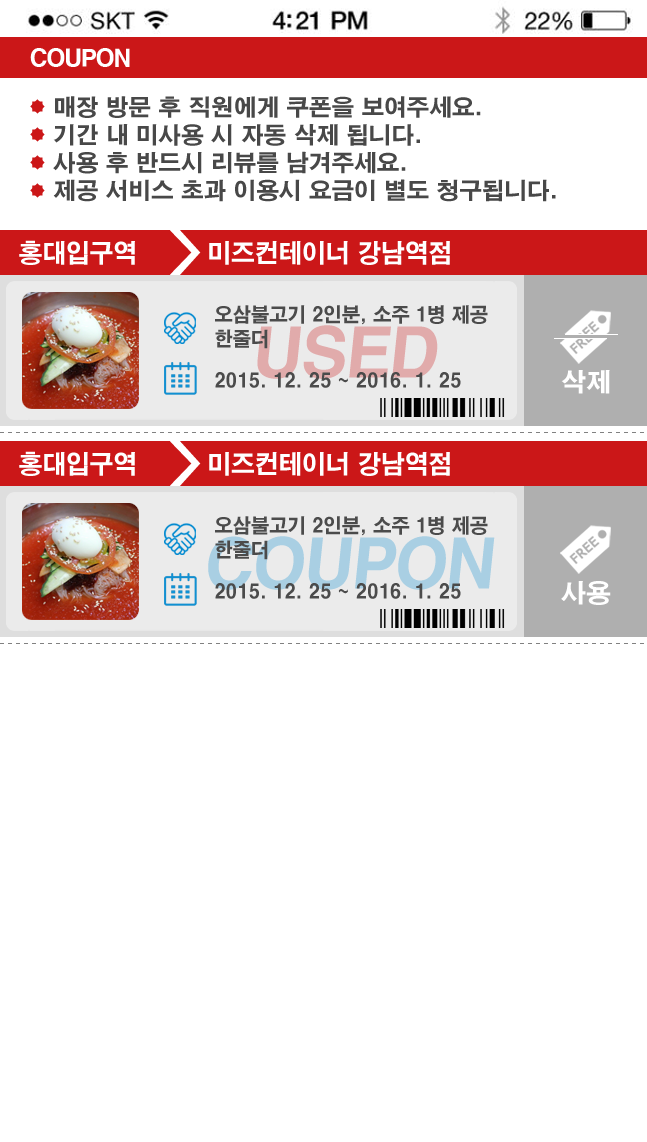
<style>
.page{position:relative;width:647px;height:1142px;background:#ffffff}
.page>*{position:absolute;margin:0}
.t1{font:23.7px "HYgtrE";letter-spacing:-0.085em;color:#ffffff}
.t2{font:22.7px/27.8px "HYgtrE";letter-spacing:-0.005em;color:#484848}
.t3{font:25.4px "HYgtrE";letter-spacing:-0.005em;color:#ffffff;scale:0.94 1}
.t4{font:19.6px/24.2px "HYgtrE";letter-spacing:-0.005em;color:#4b4b4b;scale:0.94 1}
.t5{font:66.8px "HYgtrE";letter-spacing:-0.065em;color:#e1abab}
.t6{font:19.6px "HYgtrE";letter-spacing:-0.005em;color:#4b4b4b;scale:0.94 1}
.t7{font:25.1px "HYgtrE";letter-spacing:-0.005em;color:#ffffff}
.t8{font:66.8px "HYgtrE";letter-spacing:-0.065em;color:#a9cfe3}
</style>
<div class="page">
<p class="t1" style="left:30px;top:48px;width:100px;height:19px">COUPON</p>
<p class="t2" style="left:53px;top:96px;width:503px;height:106px">매장 방문 후 직원에게 쿠폰을 보여주세요.<br>기간 내 미사용 시 자동 삭제 됩니다.<br>사용 후 반드시 리뷰를 남겨주세요.<br>제공 서비스 초과 이용시 요금이 별도 청구됩니다.</p>
<p class="t3" style="left:19px;top:240px;width:431px;height:25px">홍대입구역         미즈컨테이너 강남역점</p>
<p class="t4" style="left:215px;top:305px;width:273px;height:44px">오삼불고기 2인분, 소주 1병 제공<br>한줄더</p>
<p class="t5" style="left:257px;top:325px;width:181px;height:54px">USED</p>
<p class="t6" style="left:215px;top:372px;width:246px;height:16px">2015. 12. 25 ~ 2016. 1. 25</p>
<p class="t7" style="left:561px;top:370px;width:49px;height:24px">삭제</p>
<p class="t3" style="left:19px;top:451px;width:431px;height:25px">홍대입구역         미즈컨테이너 강남역점</p>
<p class="t4" style="left:215px;top:516px;width:273px;height:44px">오삼불고기 2인분, 소주 1병 제공<br>한줄더</p>
<p class="t8" style="left:208px;top:536px;width:287px;height:54px">COUPON</p>
<p class="t7" style="left:561px;top:581px;width:50px;height:24px">사용</p>
<p class="t6" style="left:215px;top:583px;width:246px;height:16px">2015. 12. 25 ~ 2016. 1. 25</p>
</div>
